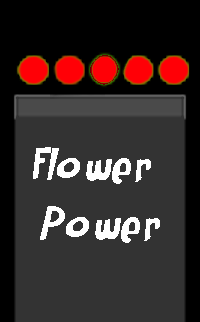
<style>
.page{position:relative;width:200px;height:322px;background:#333333}
.page>*{position:absolute;margin:0}
.t1{font:49.1px "Rumpelstiltskin";color:#ffffff;font-style:italic;scale:1.03 1}
</style>
<div class="page">
<p class="t1" style="left:33px;top:147px;width:127px;height:96px;text-align:center">Flower <br>Power</p>
</div>
